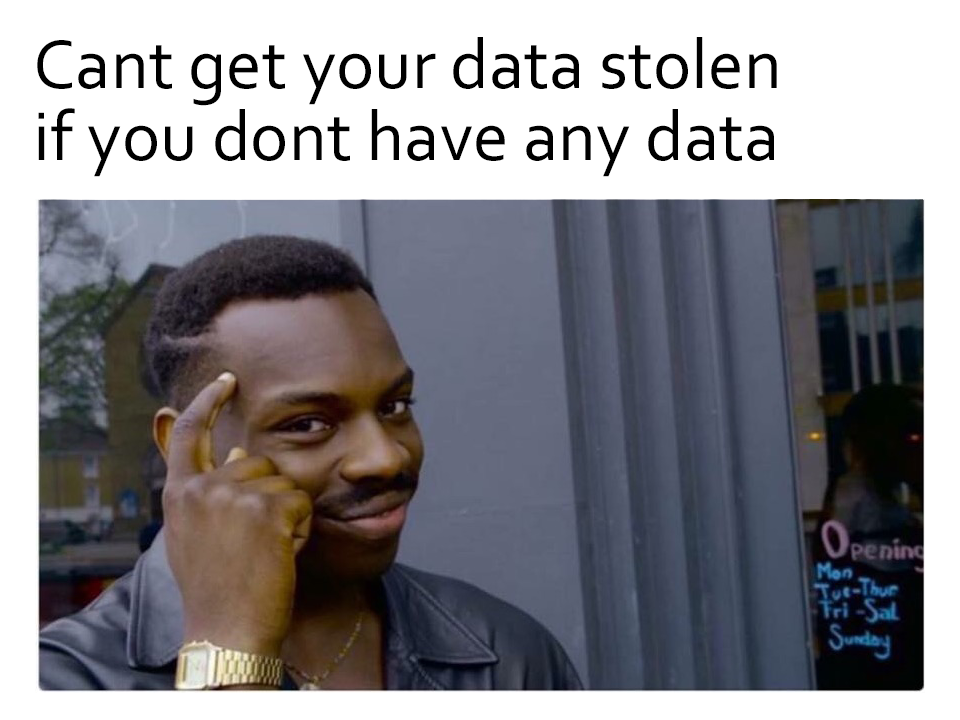
<style>
.page{position:relative;width:960px;height:720px;background:#ffffff}
.page>*{position:absolute;margin:0}
.t1{font:72px/24px "Corbel";color:#000000}
</style>
<div class="page">
<p class="t1" style="left:37px;top:37px;width:740px;height:140px">Cant get your data stolen<br><br><br>if you dont have any data</p>
</div>
